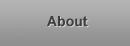
<style>
.page{position:relative;width:130px;height:46px}
.page>*{position:absolute;margin:0}
.t1{font:14px "Arial-BoldMT";color:#403f3f}
</style>
<div class="page">
<p class="t1" style="left:47px;top:16px;width:41px;height:11px">About</p>
</div>
